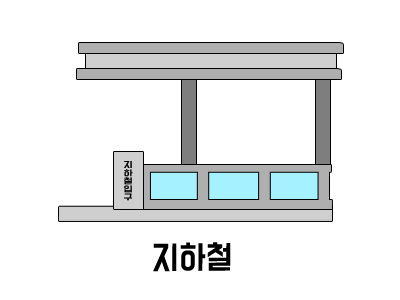
<style>
.page{position:relative;width:400px;height:300px;background:#ffffff}
.page>*{position:absolute;margin:0}
.t1{font:7.3px/8px "BMDoHyeon";color:#000000;scale:1.3 1}
.t2{font:29.2px "BMDoHyeon";color:#000000;scale:0.96 1}
</style>
<div class="page">
<p class="t1" style="left:124px;top:161px;width:9px;height:40px;text-align:center">지<br>하<br>철<br>입<br>구</p>
<p class="t2" style="left:153px;top:242px;width:78px;height:30px">지하철</p>
</div>
